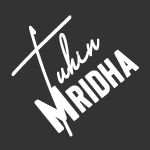
<style>
.page{position:relative;width:150px;height:150px;background:#333333}
.page>*{position:absolute;margin:0}
.t1{font:60px "HousttelySignature";color:#ffffff;font-weight:bold}
.t2{font:55px "Bison-Bold";color:#ffffff;font-variant:small-caps;font-weight:bold}
</style>
<div class="page">
<p class="t1" style="left:11px;top:15px;width:89px;height:122px;rotate:-44deg">Tuhin</p>
<p class="t2" style="left:34px;top:49px;width:105px;height:84px;rotate:-39deg">Mridha</p>
</div>
